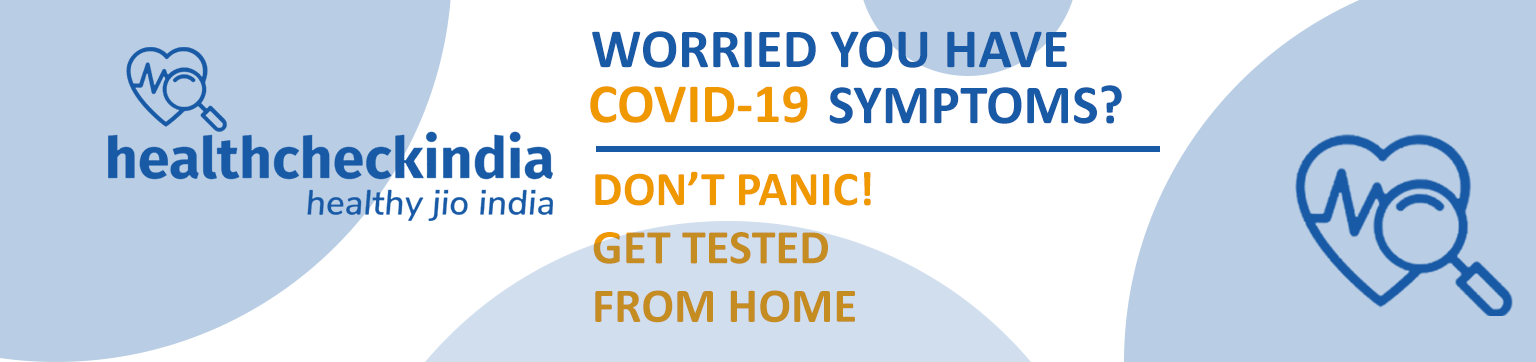
<style>
.page{position:relative;width:1536px;height:362px;background:#b9cde4}
.page>*{position:absolute;margin:0}
.t1{font:55.6px "Calibri-Bold";color:#185aa6}
.t2{font:55.6px "Calibri-Bold";color:#ef9800}
.t3{font:48.6px "Calibri-Bold"}
</style>
<div class="page">
<p class="t1" style="left:592px;top:31px;width:475px;height:37px">WORRIED YOU HAVE</p>
<p class="t2" style="left:590px;top:86px;width:218px;height:37px">COVID-19</p>
<p class="t1" style="left:829px;top:85px;width:293px;height:39px">SYMPTOMS?</p>
<p class="t3" style="left:593px;top:171px;width:278px;height:152px">DON’T PANIC!<br>GET TESTED<br>FROM HOME</p>
</div>
